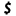
<style>
.page{position:relative;width:16px;height:16px;background:#ffffff}
.page>*{position:absolute;margin:0}
.t1{font:14px "Trebuchet-BoldItalic";letter-spacing:0.05em;color:#000000}
</style>
<div class="page">
<p class="t1" style="left:4px;top:1px;width:7px;height:14px">$</p>
</div>
